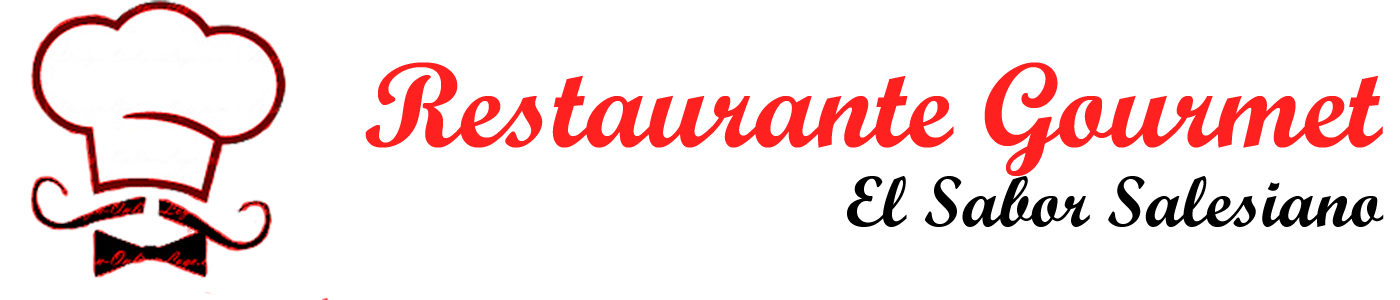
<style>
.page{position:relative;width:1400px;height:300px;background:#ffffff}
.page>*{position:absolute;margin:0}
.t1{font:120px "ScriptMTBold";color:#ff2020}
.t2{font:72px "ScriptMTBold";color:#000000}
</style>
<div class="page">
<p class="t1" style="left:365px;top:62px;width:1018px;height:114px">Restaurante Gourmet</p>
<p class="t2" style="left:847px;top:176px;width:537px;height:51px">El Sabor Salesiano</p>
</div>
